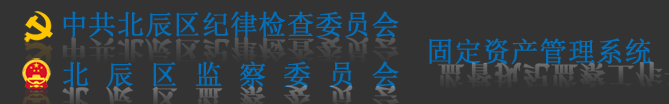
<style>
.page{position:relative;width:669px;height:104px;background:#333333}
.page>*{position:absolute;margin:0}
.t1{font:27.6px "SimSun";color:#056eb7;font-weight:bold}
.t2{font:27.5px "FZDBSJW--GB1-0";color:#464646;font-weight:bold}
.t3{font:27.6px "SimSun";letter-spacing:0.58em;color:#056eb7;font-weight:bold}
.t4{font:27.5px "FZDBSJW--GB1-0";color:#4d4d4d;font-weight:bold}
.t5{font:27.5px "FZDBSJW--GB1-0";letter-spacing:0.58em;color:#5b5b5b;font-weight:bold}
</style>
<div class="page">
<p class="t1" style="left:63px;top:11px;width:336px;height:27px">中共北辰区纪律检查委员会</p>
<p class="t2" style="left:62px;top:36px;width:338px;height:28px">中共北辰区纪律检查委员会</p>
<p class="t1" style="left:429px;top:38px;width:222px;height:27px">固定资产管理系统</p>
<p class="t3" style="left:63px;top:61px;width:336px;height:27px">北辰区监察委员会</p>
<p class="t4" style="left:437px;top:61px;width:232px;height:28px">监督执纪监察工作平台</p>
<p class="t5" style="left:62px;top:85px;width:338px;height:19px">北辰区监察委员会</p>
</div>
